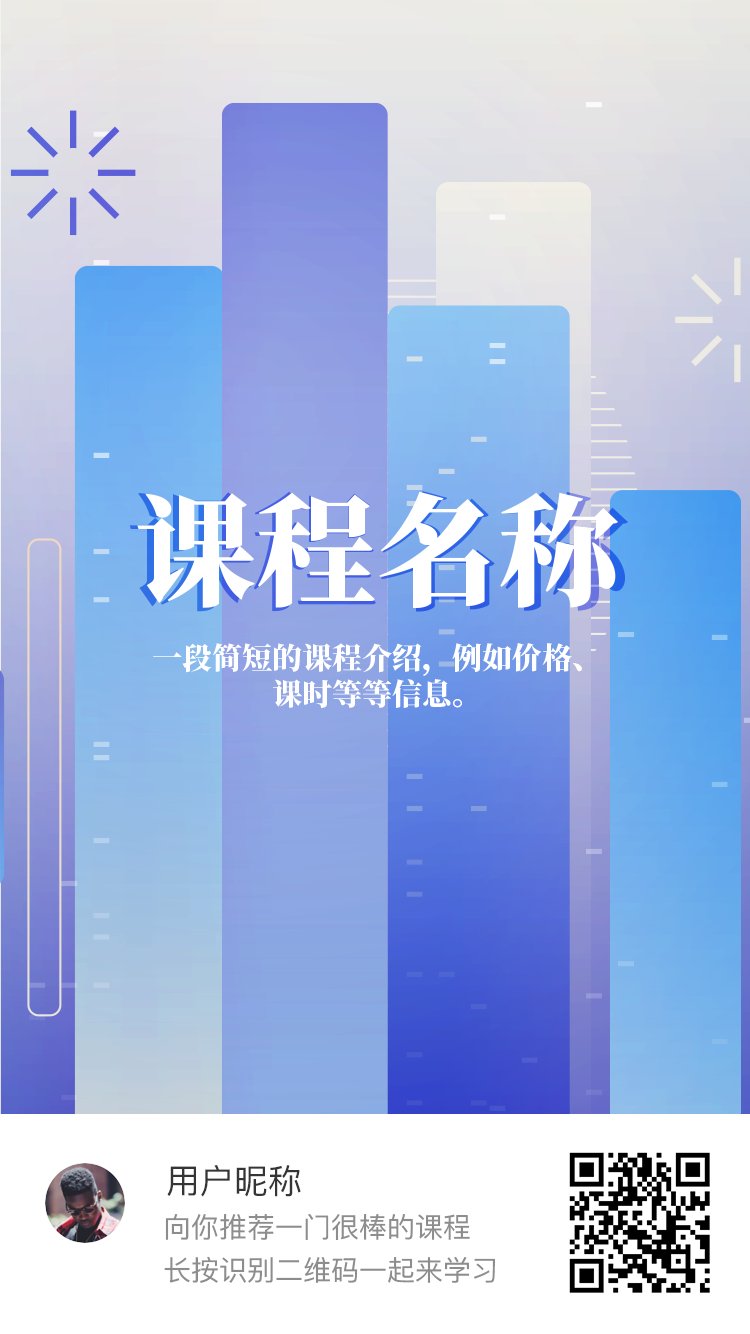
<style>
.page{position:relative;width:750px;height:1334px}
.page>*{position:absolute;margin:0}
.t1{font:125.6px "SourceHanSerifSC-Heavy"}
.t2{font:121px "SourceHanSerifSC-Heavy";color:#ffffff}
.t3{font:30px "SourceHanSerifSC-Heavy";color:#ffffff}
</style>
<div class="page">
<p class="t1" style="left:129px;top:491px;width:499px;height:121px">课程名称</p>
<p class="t1" style="left:129px;top:491px;width:499px;height:121px">课程名称</p>
<p class="t2" style="left:137px;top:491px;width:481px;height:117px">课程名称</p>
<p class="t3" style="left:153px;top:643px;width:429px;height:65px;text-align:center">一段简短的课程介绍，例如价格、<br>课时等等信息。</p>
</div>
